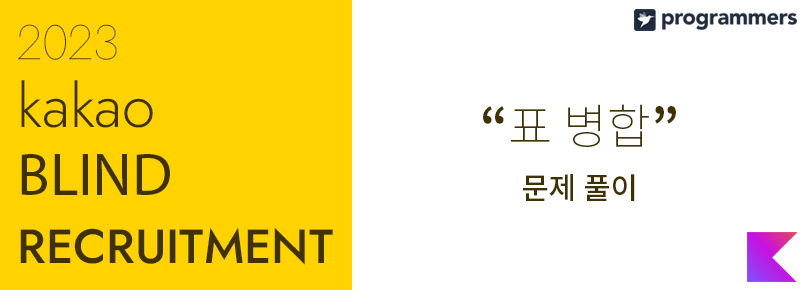
<style>
.page{position:relative;width:807px;height:290px;background:#ffffff}
.page>*{position:absolute;margin:0}
.t1{font:48px/68px "Jost-Medium";color:#403200}
.t2{font:48px/68px "Jost-Thin";color:#403200}
.t3{font:60px/68px "Jost-Light";color:#403200}
.t4{font:60px/68px "MyriadPro-Regular";color:#403200}
.t5{font:48px "NotoSansKR-Thin";color:#403200}
.t6{font:48px "NotoSansKR-Bold";color:#403200}
.t7{font:30px "NotoSansKR-Medium";color:#403200}
</style>
<div class="page">
<p class="t1" style="left:18px;top:24px;width:315px;height:241px"><span class="t2">2023<br></span><span class="t3">kakao<br></span><span class="t4">BLIND<br></span>RECRUITMENT</p>
<p class="t5" style="left:483px;top:104px;width:193px;height:43px"><span class="t6">“</span>표 병합<span class="t6">”</span></p>
<p class="t7" style="left:523px;top:174px;width:112px;height:27px">문제 풀이</p>
</div>
